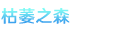
<style>
.page{position:relative;width:128px;height:32px;background:#ffffff}
.page>*{position:absolute;margin:0}
.t1{font:17.3px "HYWenHei-FEW";letter-spacing:0.025em;scale:0.97 1}
</style>
<div class="page">
<p class="t1" style="left:1px;top:7px;width:69px;height:17px">枯萎之森</p>
</div>
